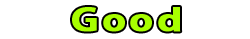
<style>
.page{position:relative;width:250px;height:39px;background:#ffffff}
.page>*{position:absolute;margin:0}
.t1{font:30.4px "AdobeGothicStd-Bold";letter-spacing:0.075em;color:#a8ff00;font-weight:bold;scale:1.29 1}
</style>
<div class="page">
<p class="t1" style="left:72px;top:7px;width:109px;height:25px">Good</p>
</div>
